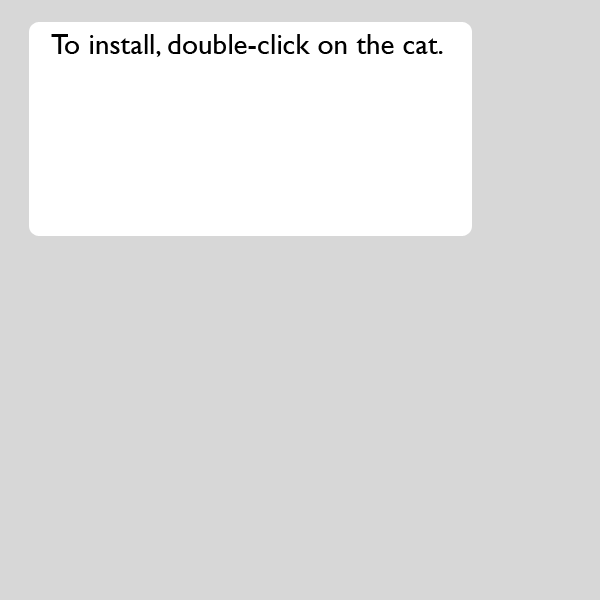
<style>
.page{position:relative;width:600px;height:600px;background:#d7d7d7}
.page>*{position:absolute;margin:0}
.t1{font:29.2px "GillSans";color:#000000}
</style>
<div class="page">
<p class="t1" style="left:51px;top:34px;width:392px;height:23px">To install, double-click on the cat.</p>
</div>
